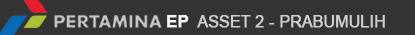
<style>
.page{position:relative;width:415px;height:35px;background:#333333}
.page>*{position:absolute;margin:0}
.t1{font:16.8px "Arial-BoldMT";color:#f8f6f6;font-weight:bold}
.t2{font:15.6px "ArialMT";color:#d0cdcd;font-weight:bold}
</style>
<div class="page">
<p class="t1" style="left:167px;top:15px;width:22px;height:13px">EP</p>
<p class="t2" style="left:197px;top:15px;width:188px;height:13px">ASSET 2 - PRABUMULIH</p>
</div>
